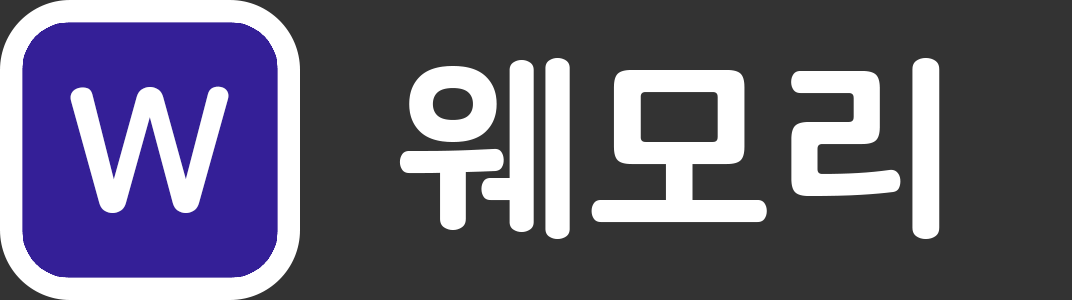
<style>
.page{position:relative;width:1072px;height:300px;background:#333333}
.page>*{position:absolute;margin:0}
.t1{font:207.4px "NanumSquareRoundEB";color:#ffffff}
.t2{font:174.2px "NanumSquareRoundEB";color:#ffffff}
</style>
<div class="page">
<p class="t1" style="left:399px;top:58px;width:541px;height:181px">웨모리</p>
<p class="t2" style="left:70px;top:86px;width:159px;height:127px">W</p>
</div>
